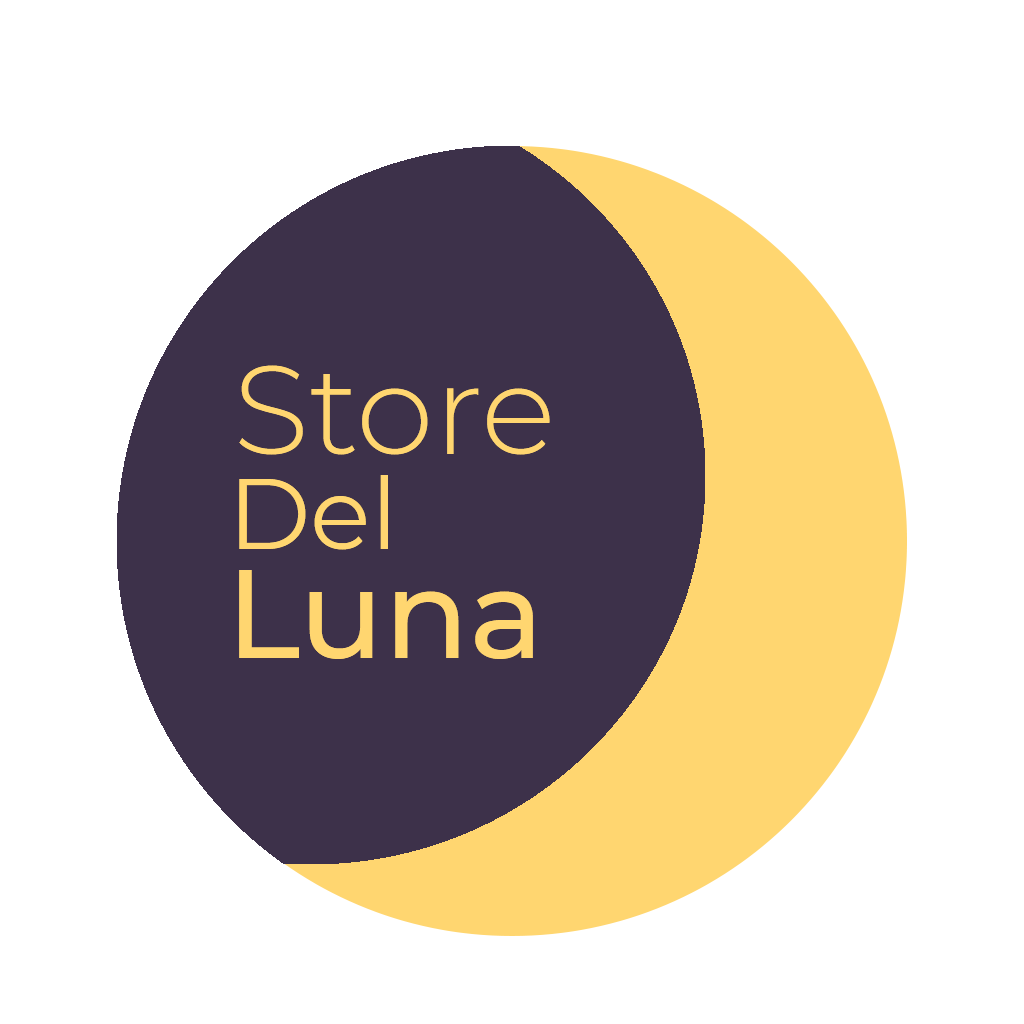
<style>
.page{position:relative;width:1024px;height:1024px;background:#ffffff}
.page>*{position:absolute;margin:0}
.t1{font:125px "Montserrat-Light";color:#ffd670}
.t2{font:100px "Montserrat-Regular";color:#ffd670}
.t3{font:125px "Montserrat-Medium";color:#ffd670}
</style>
<div class="page">
<p class="t1" style="left:239px;top:365px;width:311px;height:90px">Store</p>
<p class="t2" style="left:239px;top:475px;width:149px;height:75px">Del</p>
<p class="t3" style="left:239px;top:570px;width:294px;height:89px">Luna</p>
</div>
